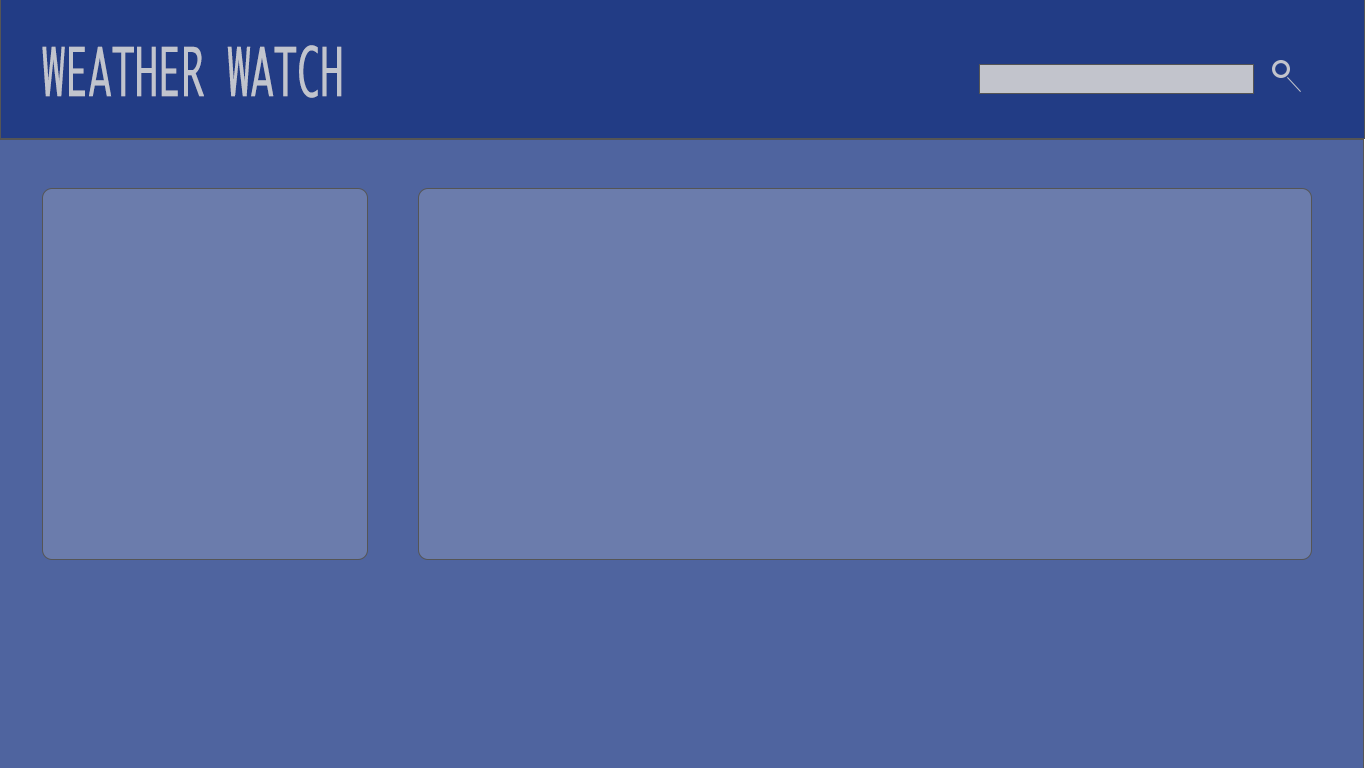
<style>
.page{position:relative;width:1366px;height:768px;background:#6b7cac}
.page>*{position:absolute;margin:0}
.t1{font:65.1px "Ayuthaya";color:#c1c4cd;scale:0.59 1}
</style>
<div class="page">
<p class="t1" style="left:42px;top:45px;width:300px;height:53px">WEATHER WATCH</p>
</div>
